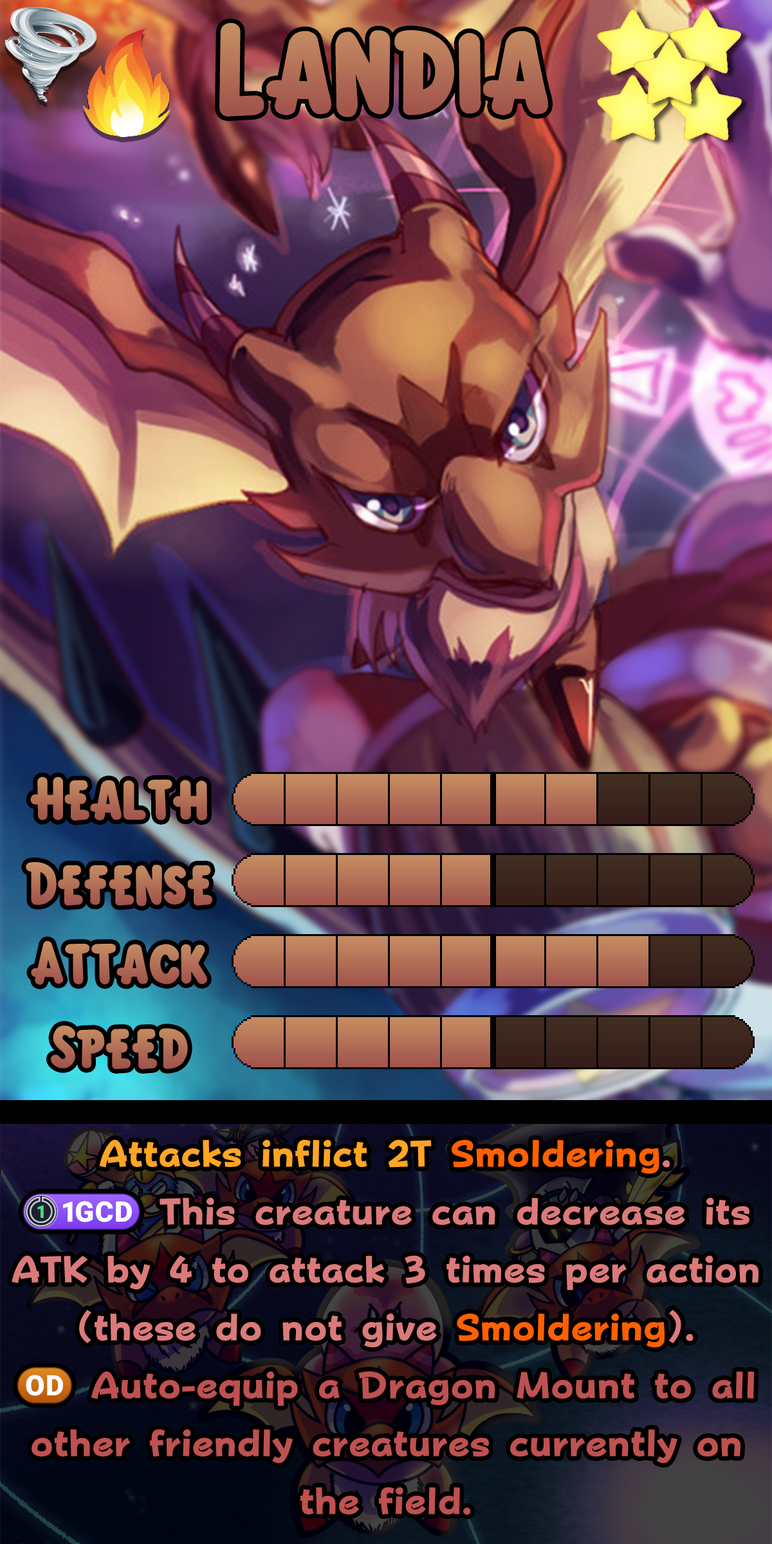
<style>
.page{position:relative;width:772px;height:1544px}
.page>*{position:absolute;margin:0}
.t1{font:194.3px "KirbyClassic";color:#b06c55}
.t2{font:92.7px "KirbyClassic";color:#b26e56}
.t3{font:92.7px "KirbyClassic";color:#b37057}
.t4{font:92.7px "KirbyClassic"}
.t5{font:92.7px "KirbyClassic";color:#b47157}
.t6{font:63.7px/57.9px "FOTPopHappinessStrp-ExtraBold";color:#db7a7a}
.t7{font:63.7px/57.9px "FOTPopHappinessStrp-ExtraBold";color:#ffa525}
.t8{font:63.7px/57.9px "FOTPopHappinessStrp-ExtraBold";color:#ff6000}
.t9{font:63.7px/57.9px "stoogedings-Regular";color:#db7a7a}
.t10{font:63.7px/57.9px "stoogedings-Regular";color:#bf5151}
.t11{font:63.7px/57.9px "FOTPopHappinessStrp-ExtraBold";color:#bf5151}
</style>
<div class="page">
<p class="t1" style="left:219px;top:23px;width:329px;height:94px">Landia</p>
<p class="t2" style="left:30px;top:777px;width:178px;height:44px">Health</p>
<p class="t3" style="left:26px;top:862px;width:186px;height:45px">Defense</p>
<p class="t4" style="left:31px;top:941px;width:176px;height:44px">Attack</p>
<p class="t5" style="left:50px;top:1026px;width:138px;height:43px">Speed</p>
<p class="t6" style="left:12px;top:1140px;width:747px;height:375px;text-align:center"><span class="t7">Attacks inflict 2T </span><span class="t8">Smoldering</span>.<br><span class="t9">(1GCD)</span> This creature can decrease its ATK by 4 to attack 3 times per action (these do not give <span class="t8">Smoldering</span>).<br><span class="t10">(OD)</span><span class="t11"> Auto-equip a Dragon Mount to all other friendly creatures currently on the field.</span></p>
</div>
